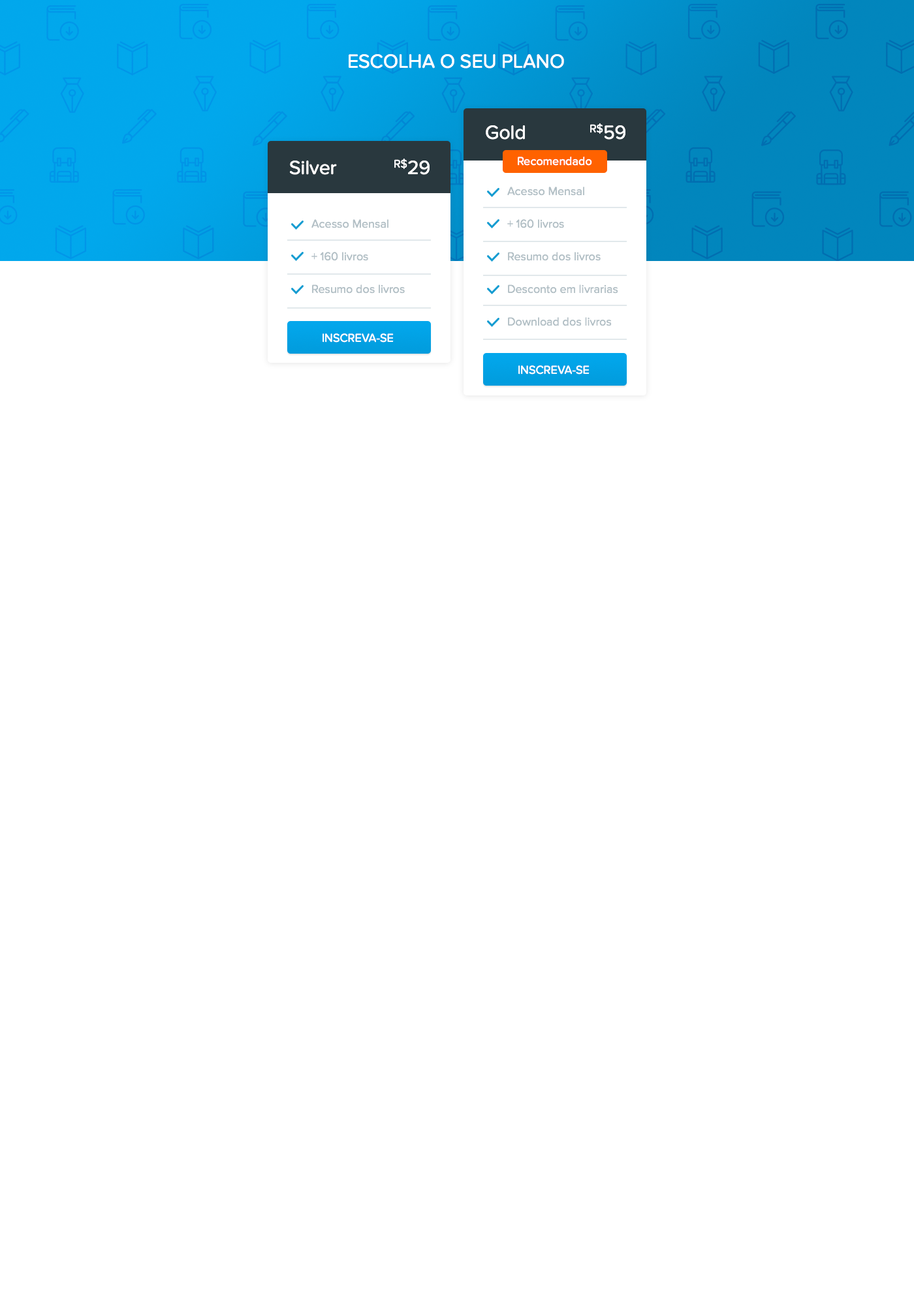
<style>
.page{position:relative;width:914px;height:1305px;background:#ffffff}
.page>*{position:absolute;margin:0}
.t1{font:19.6px "ProximaNovaSoft-Regular";color:#ffffff;text-transform:uppercase}
.t2{font:19.6px "ProximaNovaSoft-Regular";color:#ffffff}
.t3{font:11.7px "ProximaNovaSoft-Regular";color:#ffffff}
.t4{font:11.7px/32.6px "ProximaNovaSoft-Regular";color:#b3c0c6}
.t5{font:11.7px "ProximaNovaSoft-Regular";color:#ffffff;text-transform:uppercase}
</style>
<div class="page">
<p class="t1" style="left:348px;top:54px;width:216px;height:15px">Escolha o seu Plano</p>
<p class="t2" style="left:486px;top:125px;width:39px;height:15px">Gold</p>
<p class="t2" style="left:590px;top:123px;width:35px;height:17px">R$59</p>
<p class="t2" style="left:290px;top:161px;width:47px;height:14px">Silver</p>
<p class="t2" style="left:394px;top:159px;width:35px;height:16px">R$29</p>
<p class="t3" style="left:518px;top:157px;width:74px;height:9px">Recomendado</p>
<p class="t4" style="left:507px;top:187px;width:111px;height:139px">Acesso Mensal<br>+ 160 livros<br>Resumo dos livros<br>Desconto em livrarias<br>Download dos livros</p>
<p class="t4" style="left:311px;top:219px;width:94px;height:75px">Acesso Mensal<br>+ 160 livros<br>Resumo dos livros</p>
<p class="t5" style="left:322px;top:333px;width:72px;height:10px">Inscreva-se</p>
<p class="t5" style="left:518px;top:365px;width:71px;height:10px">Inscreva-se</p>
</div>
